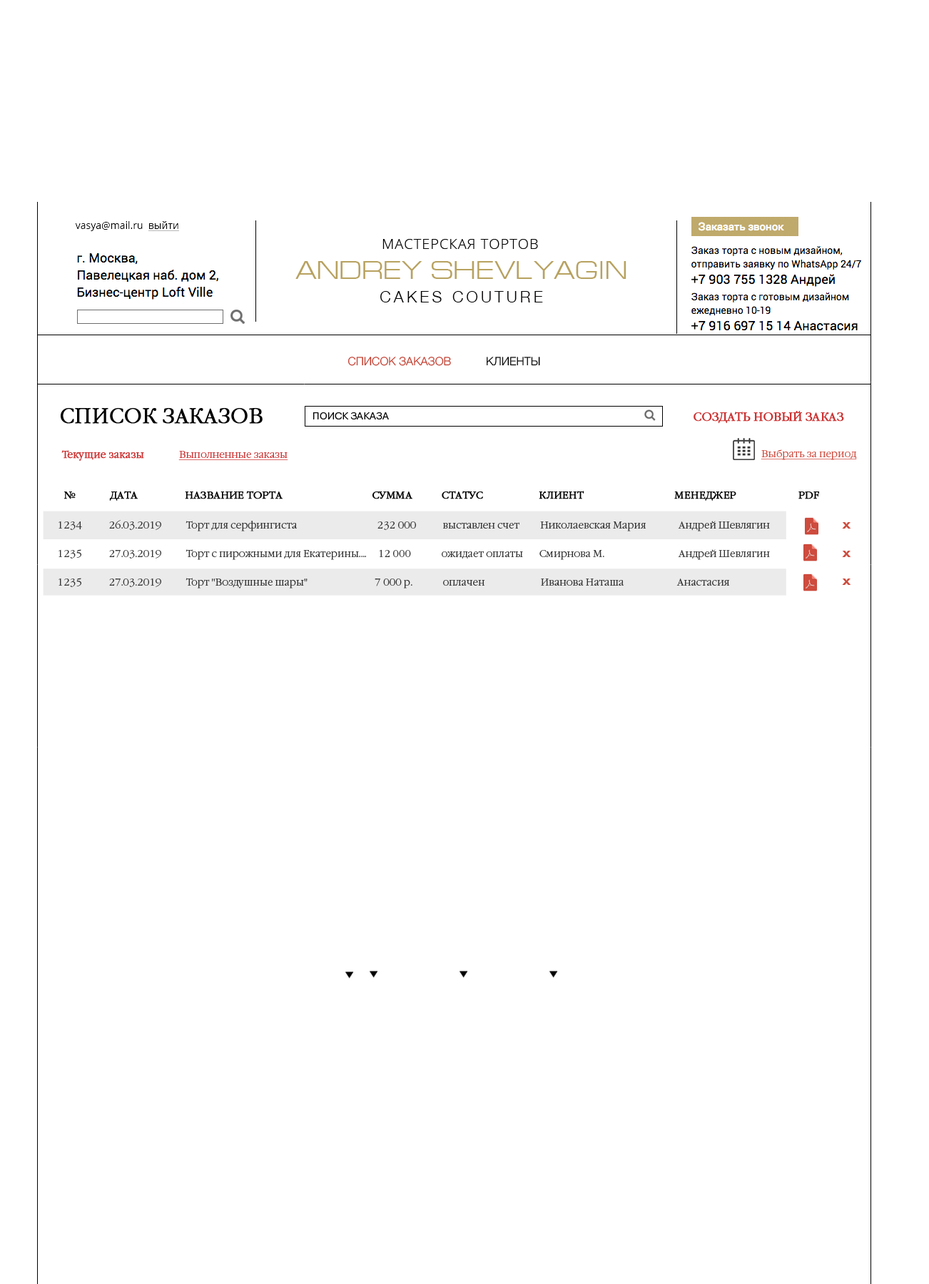
<style>
.page{position:relative;width:929px;height:1284px;background:#ffffff}
.page>*{position:absolute;margin:0}
.t1{font:11.4px "Helvetica-Light";color:#c03728;text-transform:uppercase}
.t2{font:11.4px "Helvetica-Light";color:#000000;text-transform:uppercase}
.t3{font:20.3px "GaramondC-Light";color:#000000;font-weight:bold}
.t4{font:10px "PragmaticaLight-Reg";color:#000000}
.t5{font:11.4px "GaramondC-Light";color:#cc3333;font-weight:bold}
.t6{font:10px "GaramondC-Light";color:#ce4b3e;text-decoration:underline}
.t7{font:10px "GaramondC-Light";color:#cc3333;text-decoration:underline}
.t8{font:10px "GaramondC-Light";color:#cc3333;font-weight:bold}
.t9{font:10px "GaramondC-Light";color:#000000;text-transform:uppercase;font-weight:bold}
.t10{font:10px/14.3px "GaramondC-Light";color:#333333}
.t11{font:11.7px "Arial-BoldMT";color:#ce4c3e;scale:1.33 1}
</style>
<div class="page">
<p class="t1" style="left:347px;top:357px;width:193px;height:9px">Список заказов<span class="t2">           Клиенты</span></p>
<p class="t3" style="left:61px;top:408px;width:201px;height:16px">СПИСОК ЗАКАЗОВ</p>
<p class="t4" style="left:313px;top:412px;width:76px;height:7px">ПОИСК ЗАКАЗА</p>
<p class="t5" style="left:693px;top:411px;width:151px;height:13px">СОЗДАТЬ НОВЫЙ ЗАКАЗ</p>
<p class="t6" style="left:760px;top:449px;width:97px;height:11px">Выбрать за период</p>
<p class="t7" style="left:61px;top:450px;width:227px;height:11px"><span class="t8">Текущие заказы               </span>Выполненные заказы</p>
<p class="t9" style="left:63px;top:491px;width:756px;height:10px">№          Дата                   Название торта     Сумма          Статус       КЛИЕНТ                                   МЕНЕДЖЕР                        PDF</p>
<p class="t10" style="left:58px;top:520px;width:712px;height:68px">1234  26.03.2019 Торт для серфингиста                  232 000            выставлен счет         Николаевская Мария              Андрей Шевлягин <br><br>1235  27.03.2019  Торт с пирожными для Екатерины....     12 000             ожидает оплаты       Смирнова М.                                Андрей Шевлягин        <br><br>1235  27.03.2019  Торт "Воздушные шары"                           7 000 р.            оплачен                        Иванова Наташа                       Анастасия</p>
<p class="t11" style="left:842px;top:522px;width:9px;height:7px">х</p>
<p class="t11" style="left:842px;top:551px;width:9px;height:6px">х</p>
<p class="t11" style="left:842px;top:578px;width:9px;height:7px">х</p>
</div>
